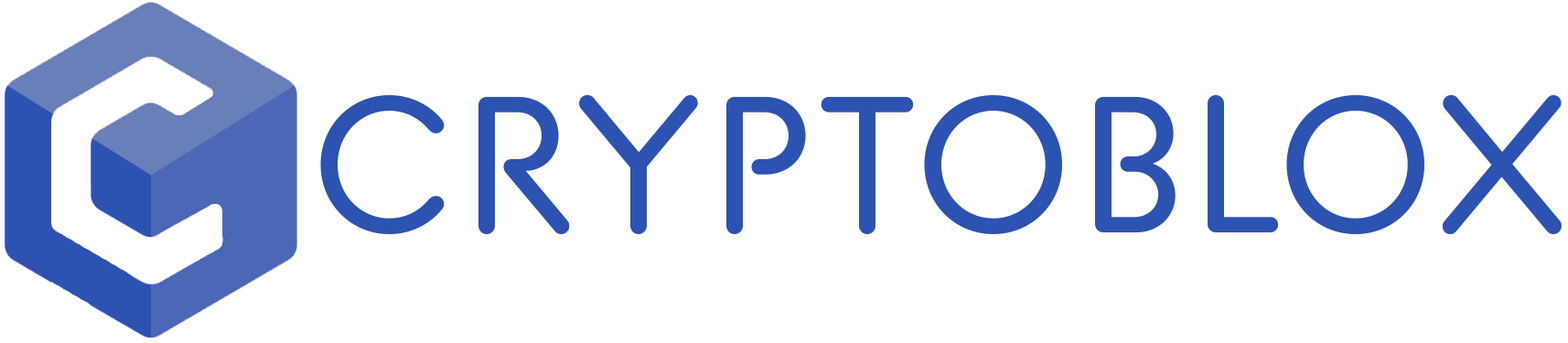
<style>
.page{position:relative;width:1568px;height:343px;background:#ffffff}
.page>*{position:absolute;margin:0}
.t1{font:193.1px "BCAlphapipeRB-Regular";letter-spacing:0.06em;color:#2c52b2}
</style>
<div class="page">
<p class="t1" style="left:320px;top:95px;width:1242px;height:139px">CRYPTOBLOX</p>
</div>
